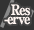
<style>
.page{position:relative;width:34px;height:30px;background:#333333}
.page>*{position:absolute;margin:0}
.t1{font:14px/9px "RyuminPro-ExBold";letter-spacing:-0.08em;color:#fff6f2;scale:0.9 1}
</style>
<div class="page">
<p class="t1" style="left:4px;top:4px;width:26px;height:21px;text-align:right">Res<br>-erve</p>
</div>
